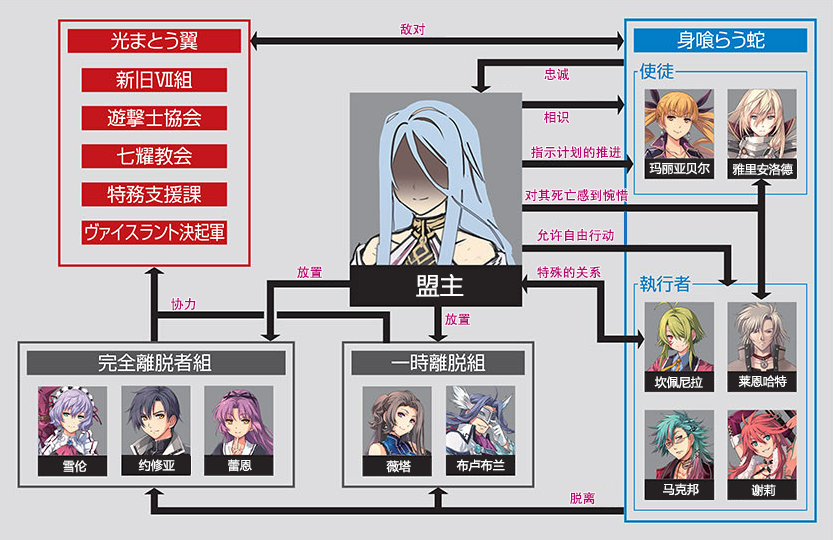
<style>
.page{position:relative;width:833px;height:540px;background:#dddddf}
.page>*{position:absolute;margin:0}
.t1{font:13px "AdobeHeitiStd-Regular";color:#b70773}
.t2{font:12px "MicrosoftYaHei";color:#ffffff}
.t3{font:24px "MicrosoftYaHei";color:#ffffff}
</style>
<div class="page">
<p class="t1" style="left:400px;top:23px;width:26px;height:13px">敌对</p>
<p class="t1" style="left:544px;top:68px;width:26px;height:13px">忠诚</p>
<p class="t1" style="left:544px;top:111px;width:26px;height:13px">相识</p>
<p class="t1" style="left:531px;top:146px;width:90px;height:13px">指示计划的推进</p>
<p class="t2" style="left:649px;top:162px;width:61px;height:13px">玛丽亚贝尔</p>
<p class="t2" style="left:732px;top:163px;width:61px;height:13px">雅里安洛德</p>
<p class="t1" style="left:525px;top:189px;width:103px;height:13px">对其死亡感到惋惜</p>
<p class="t1" style="left:537px;top:229px;width:77px;height:13px">允许自由行动</p>
<p class="t1" style="left:297px;top:266px;width:25px;height:13px">放置</p>
<p class="t1" style="left:537px;top:266px;width:64px;height:13px">特殊的关系</p>
<p class="t3" style="left:416px;top:274px;width:48px;height:23px">盟主</p>
<p class="t1" style="left:171px;top:298px;width:25px;height:13px">协力</p>
<p class="t1" style="left:445px;top:313px;width:25px;height:13px">放置</p>
<p class="t2" style="left:654px;top:376px;width:49px;height:13px">坎佩尼拉</p>
<p class="t2" style="left:738px;top:375px;width:49px;height:13px">莱恩哈特</p>
<p class="t2" style="left:63px;top:460px;width:24px;height:13px">雪伦</p>
<p class="t2" style="left:138px;top:459px;width:37px;height:13px">约修亚</p>
<p class="t2" style="left:228px;top:459px;width:24px;height:13px">蕾恩</p>
<p class="t2" style="left:386px;top:460px;width:25px;height:13px">薇塔</p>
<p class="t2" style="left:456px;top:459px;width:49px;height:13px">布卢布兰</p>
<p class="t2" style="left:663px;top:483px;width:36px;height:13px">马克邦</p>
<p class="t2" style="left:751px;top:484px;width:25px;height:13px">谢莉</p>
<p class="t1" style="left:570px;top:492px;width:25px;height:13px">脱离</p>
</div>
